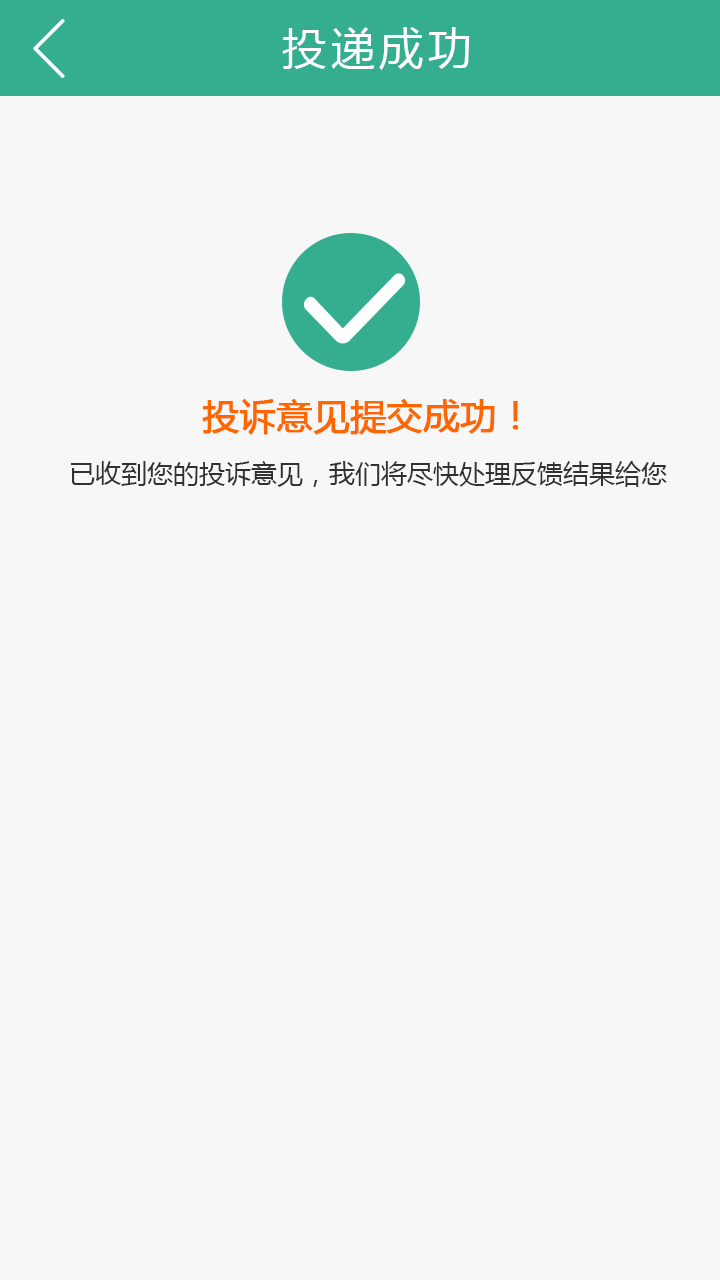
<style>
.page{position:relative;width:720px;height:1280px;background:#f7f7f7}
.page>*{position:absolute;margin:0}
.t1{font:44px "MicrosoftYaHei";letter-spacing:0.1em;color:#ffffff}
.t2{font:26px "MicrosoftYaHei";color:#313131}
.t3{font:36px "MicrosoftYaHei";color:#fe6600;font-weight:bold}
</style>
<div class="page">
<p class="t1" style="left:282px;top:27px;width:188px;height:43px">投递成功</p>
<p class="t2" style="left:71px;top:399px;width:596px;height:88px;text-align:center"><span class="t3">投诉意见提交成功！<br></span>已收到您的投诉意见，我们将尽快处理反馈结果给您</p>
</div>
